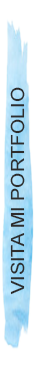
<style>
.page{position:relative;width:37px;height:365px;background:#ffffff}
.page>*{position:absolute;margin:0}
.t1{font:18px "ArialMT";color:#2d2d2d;scale:1.1 1}
</style>
<div class="page">
<p class="t1" style="left:10px;top:87px;width:15px;height:208px;rotate:-90deg">VISITA MI PORTFOLIO</p>
</div>
